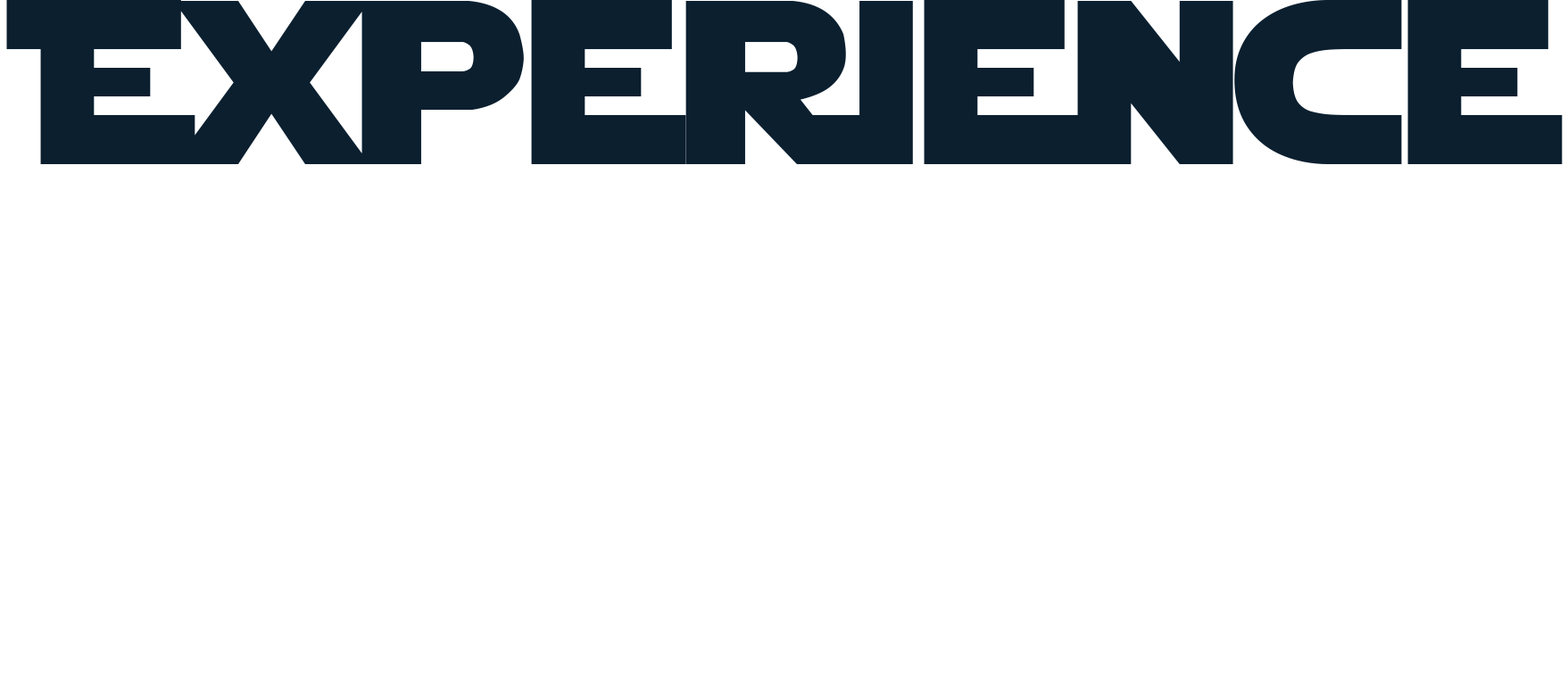
<style>
.page{position:relative;width:1568px;height:678px;background:#ffffff}
.page>*{position:absolute;margin:0}
.t1{font:232px "StarJedi";color:#0b1f2f}
</style>
<div class="page">
<p class="t1" style="left:6px;top:0px;width:1557px;height:164px">Experience</p>
</div>
